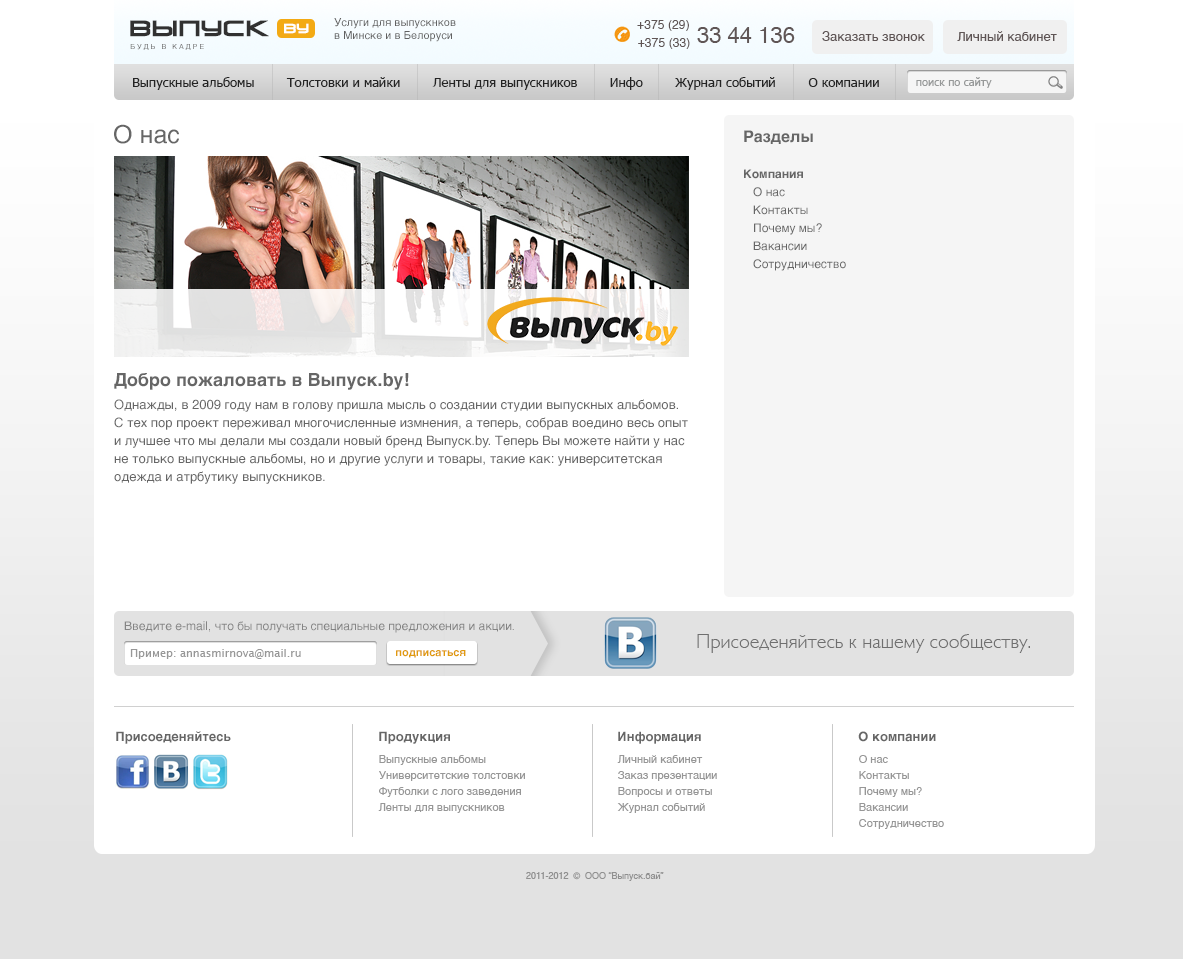
<style>
.page{position:relative;width:1183px;height:959px;background:#ffffff}
.page>*{position:absolute;margin:0}
.t1{font:21px "VenusRisingCyrillic";letter-spacing:0.01em;color:#313131;font-weight:bold}
.t2{font:12.6px "VenusRisingCyrillic";letter-spacing:0.01em;color:#ffffff;font-weight:bold}
.t3{font:11px "Helvetica";color:#616161}
.t4{font:12px "Helvetica";letter-spacing:0.01em;color:#5f5555}
.t5{font:22px "Helvetica";color:#5f5555}
.t6{font:13px "Helvetica";color:#5f5555}
.t7{font:7px "Helvetica";letter-spacing:0.3em;color:#6d6d6d;text-transform:uppercase}
.t8{font:13px "Tahoma";color:#242424}
.t9{font:11px "Tahoma";color:#979999}
.t10{font:25px "Helvetica";color:#666666}
.t11{font:12px/18px "Helvetica";color:#666666}
.t12{font:16px "Helvetica-Bold";color:#666666}
.t13{font:12px/36px "Helvetica-Bold";color:#666666}
.t14{font:18px "Helvetica-Bold";color:#666666}
.t15{font:13px/18px "Helvetica";color:#666666}
.t16{font:12px "Helvetica";color:#848484}
.t17{font:20px "GillSans-Light";color:#6f6f6f}
.t18{font:11px "LucidaGrande";color:#979797}
.t19{font:11px "Helvetica-Bold";color:#e09b0e}
.t20{font:13px "Helvetica-Bold";color:#666666}
.t21{font:11px/16px "Helvetica";color:#979797}
.t22{font:9px "Helvetica";color:#909090}
</style>
<div class="page">
<p class="t1" style="left:130px;top:20px;width:139px;height:17px">ВЫпуск</p>
<p class="t2" style="left:284px;top:23px;width:25px;height:11px">by</p>
<p class="t3" style="left:334px;top:18px;width:122px;height:24px">Услуги для выпускнков<br>в Минске и в Белоруси</p>
<p class="t4" style="left:637px;top:20px;width:52px;height:11px">+375 (29)</p>
<p class="t5" style="left:697px;top:27px;width:98px;height:16px">33 44 136</p>
<p class="t4" style="left:638px;top:38px;width:52px;height:11px">+375 (33)</p>
<p class="t6" style="left:822px;top:31px;width:235px;height:10px">Заказать звонок         Личный кабинет</p>
<p class="t7" style="left:130px;top:44px;width:74px;height:6px">будь в кадре</p>
<p class="t8" style="left:133px;top:77px;width:746px;height:13px">Выпускные альбомы        Толстовки и майки        Ленты для выпускников        Инфо        Журнал событий        О компании</p>
<p class="t9" style="left:916px;top:77px;width:76px;height:11px">поиск по сайту</p>
<p class="t10" style="left:114px;top:124px;width:65px;height:20px">О нас</p>
<p class="t11" style="left:744px;top:130px;width:102px;height:141px"><span class="t12">Разделы<br></span><span class="t13">Компания<br></span>   О нас<br>   Контакты<br>   Почему мы? <br>   Вакансии<br>   Сотрудничество</p>
<p class="t14" style="left:114px;top:373px;width:295px;height:17px">Добро пожаловать в Выпуск.by!</p>
<p class="t15" style="left:114px;top:399px;width:574px;height:85px">Однажды, в 2009 году нам в голову пришла мысль о создании студии выпускных альбомов. С тех пор проект переживал многочисленные измнения, а теперь, собрав воедино весь опыт и лучшее что мы делали мы создали новый бренд Выпуск.by. Теперь Вы можете найти у нас не только выпускные альбомы, но и другие услуги и товары, такие как: университетская одежда и атрбутику выпускников.</p>
<p class="t16" style="left:124px;top:621px;width:390px;height:12px">Введите e-mail, что бы получать специальные предложения и акции.</p>
<p class="t17" style="left:697px;top:634px;width:333px;height:19px">Присоеденяйтесь к нашему сообществу.</p>
<p class="t18" style="left:130px;top:649px;width:171px;height:10px">Пример: annasmirnova@mail.ru</p>
<p class="t19" style="left:396px;top:650px;width:70px;height:8px">подписаться</p>
<p class="t20" style="left:116px;top:731px;width:115px;height:13px">Присоеденяйтесь</p>
<p class="t20" style="left:379px;top:731px;width:71px;height:13px">Продукция</p>
<p class="t20" style="left:618px;top:731px;width:83px;height:13px">Информация</p>
<p class="t20" style="left:858px;top:731px;width:78px;height:11px">О компании</p>
<p class="t21" style="left:378px;top:755px;width:147px;height:58px">Выпускные альбомы<br>Университетские толстовки<br>Футболки с лого заведения<br>Ленты для выпускников</p>
<p class="t21" style="left:617px;top:755px;width:100px;height:58px">Личный кабинет<br>Заказ презентации<br>Вопросы и ответы<br>Журнал событий</p>
<p class="t21" style="left:859px;top:755px;width:85px;height:74px">О нас<br>Контакты<br>Почему мы? <br>Вакансии<br>Сотрудничество</p>
<p class="t22" style="left:526px;top:872px;width:138px;height:9px">2011-2012  ©  ООО “Выпуск.бай”</p>
</div>
